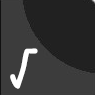
<style>
.page{position:relative;width:95px;height:95px;background:#3c3c3c}
.page>*{position:absolute;margin:0}
.t1{font:48px "ComicSansMS";color:#ffffff}
</style>
<div class="page">
<p class="t1" style="left:10px;top:48px;width:28px;height:41px">√</p>
</div>
